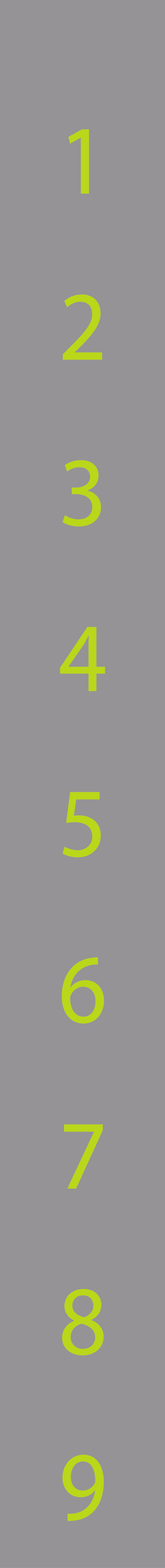
<style>
.page{position:relative;width:165px;height:1568px;background:#959395}
.page>*{position:absolute;margin:0}
.t1{font:98.7px "MyriadPro-Regular";color:#bad71a;scale:0.96 1}
</style>
<div class="page">
<p class="t1" style="left:68px;top:129px;width:21px;height:65px">1</p>
<p class="t1" style="left:63px;top:294px;width:39px;height:66px">2</p>
<p class="t1" style="left:62px;top:460px;width:39px;height:66px">3</p>
<p class="t1" style="left:60px;top:627px;width:45px;height:64px">4</p>
<p class="t1" style="left:62px;top:792px;width:39px;height:65px">5</p>
<p class="t1" style="left:62px;top:957px;width:42px;height:67px">6</p>
<p class="t1" style="left:64px;top:1124px;width:39px;height:65px">7</p>
<p class="t1" style="left:62px;top:1289px;width:42px;height:66px">8</p>
<p class="t1" style="left:62px;top:1454px;width:42px;height:67px">9</p>
</div>
